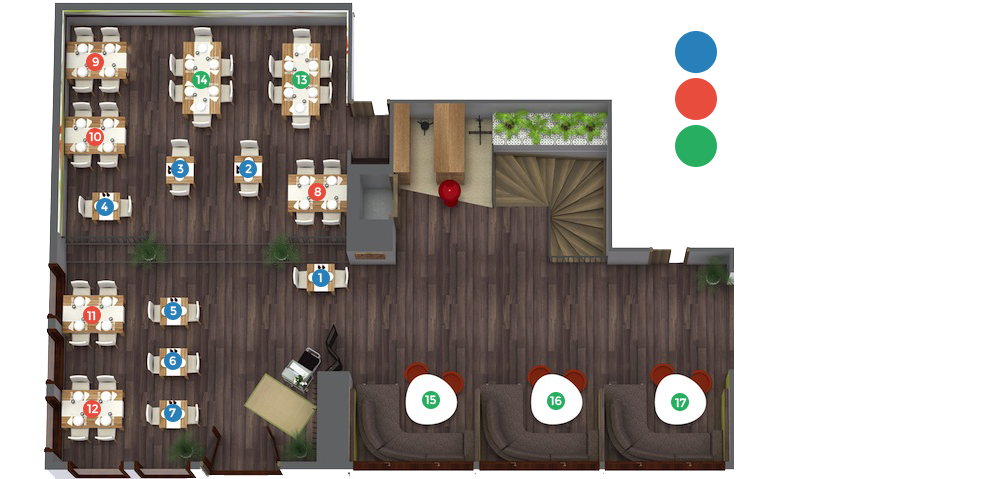
<style>
.page{position:relative;width:1000px;height:479px;background:#ffffff}
.page>*{position:absolute;margin:0}
.t1{font:12px "Montserrat-Regular";color:#ffffff}
</style>
<div class="page">
<p class="t1" style="left:92px;top:57px;width:7px;height:10px">9</p>
<p class="t1" style="left:196px;top:75px;width:12px;height:10px">14</p>
<p class="t1" style="left:296px;top:75px;width:11px;height:10px">13</p>
<p class="t1" style="left:89px;top:132px;width:13px;height:10px">10</p>
<p class="t1" style="left:177px;top:164px;width:7px;height:10px">3</p>
<p class="t1" style="left:245px;top:164px;width:7px;height:10px">2</p>
<p class="t1" style="left:314px;top:187px;width:8px;height:10px">8</p>
<p class="t1" style="left:101px;top:202px;width:7px;height:10px">4</p>
<p class="t1" style="left:318px;top:273px;width:4px;height:10px">1</p>
<p class="t1" style="left:87px;top:311px;width:9px;height:10px">11</p>
<p class="t1" style="left:170px;top:306px;width:7px;height:10px">5</p>
<p class="t1" style="left:169px;top:356px;width:7px;height:10px">6</p>
<p class="t1" style="left:425px;top:395px;width:11px;height:10px">15</p>
<p class="t1" style="left:550px;top:396px;width:12px;height:10px">16</p>
<p class="t1" style="left:675px;top:398px;width:12px;height:10px">17</p>
<p class="t1" style="left:87px;top:404px;width:12px;height:10px">12</p>
<p class="t1" style="left:169px;top:408px;width:7px;height:10px">7</p>
</div>
